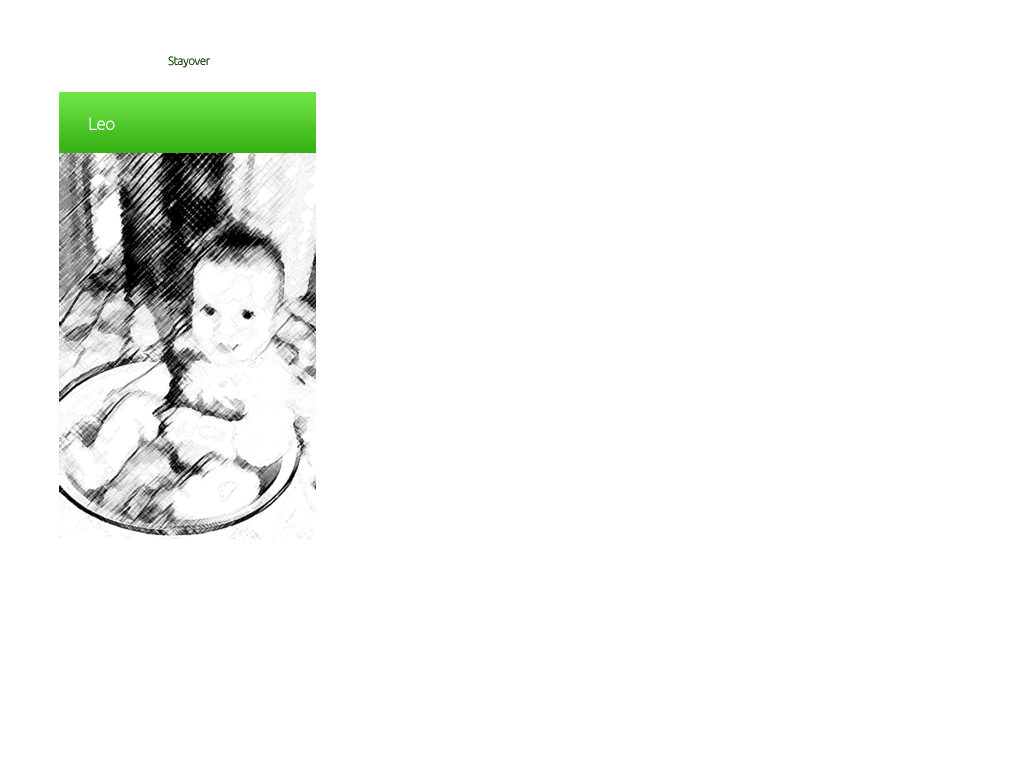
<style>
.page{position:relative;width:1024px;height:768px;background:#ffffff}
.page>*{position:absolute;margin:0}
.t1{font:12px "Ubuntu-Light";letter-spacing:-0.05em;color:#1a480c}
.t2{font:18px "Ubuntu-Light";letter-spacing:-0.05em;color:#ffffff}
</style>
<div class="page">
<p class="t1" style="left:168px;top:56px;width:42px;height:12px">Stayover</p>
<p class="t2" style="left:89px;top:117px;width:26px;height:13px">Leo</p>
</div>
